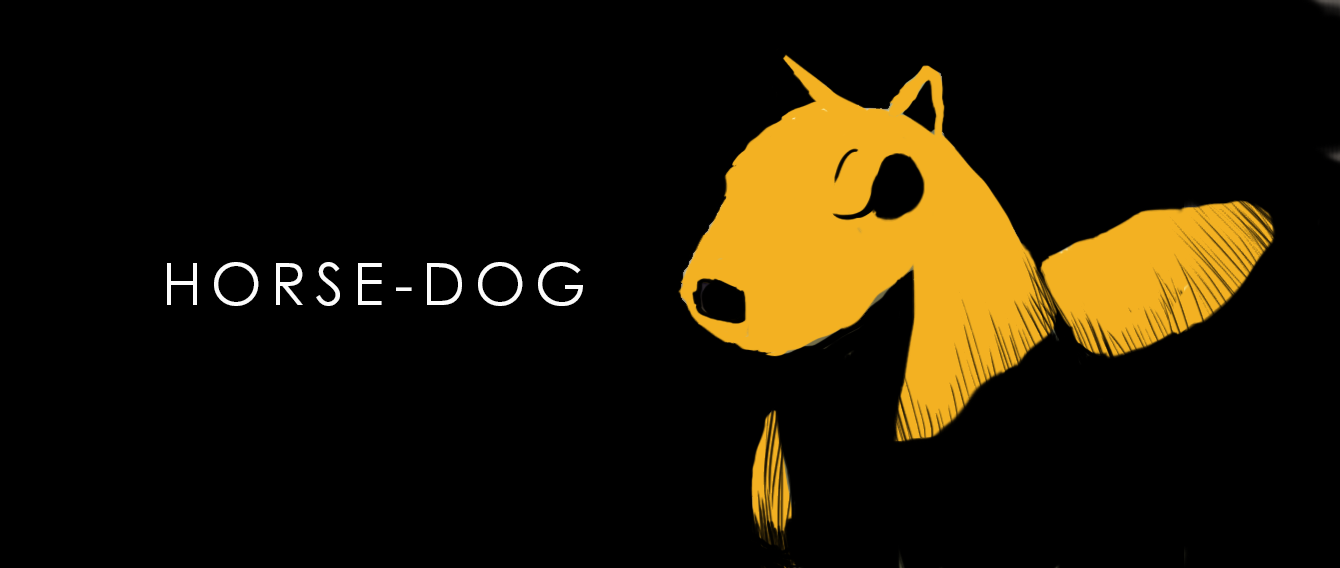
<style>
.page{position:relative;width:1340px;height:568px;background:#000000}
.page>*{position:absolute;margin:0}
.t1{font:58px "CenturyGothic";letter-spacing:0.16em;color:#fcfcfc}
</style>
<div class="page">
<p class="t1" style="left:167px;top:262px;width:416px;height:44px">HORSE-DOG</p>
</div>
